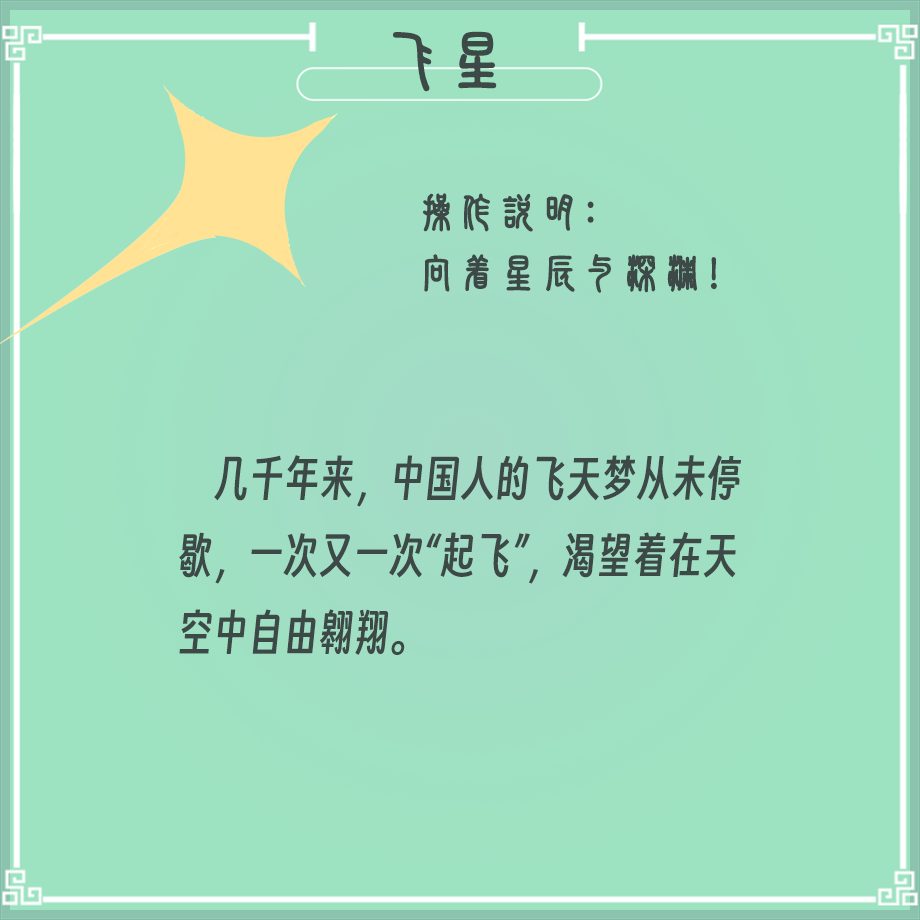
<style>
.page{position:relative;width:920px;height:920px;background:#9de2c1}
.page>*{position:absolute;margin:0}
.t1{font:64px "SJxiaozhuanjian-Regular";color:#3d4947;font-weight:bold}
.t2{font:40px/61px "SJxiaozhuanjian-Regular";color:#3d4947;font-weight:bold}
.t3{font:45.8px "SmileySans-Oblique";color:#3d4947;scale:0.96 1}
</style>
<div class="page">
<p class="t1" style="left:392px;top:31px;width:105px;height:61px">飞星</p>
<p class="t2" style="left:422px;top:193px;width:295px;height:100px">操作说明：<br>向着星辰与深渊！</p>
<p class="t3" style="left:179px;top:455px;width:562px;height:200px">几千年来，中国人的飞天梦从未停歇，一次又一次“起飞”，渴望着在天空中自由翱翔。</p>
</div>
